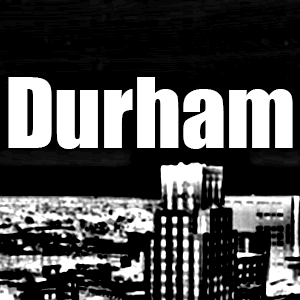
<style>
.page{position:relative;width:300px;height:300px;background:#000000}
.page>*{position:absolute;margin:0}
.t1{font:90px "Impact";color:#ffffff}
</style>
<div class="page">
<p class="t1" style="left:8px;top:77px;width:285px;height:72px">Durham</p>
</div>
